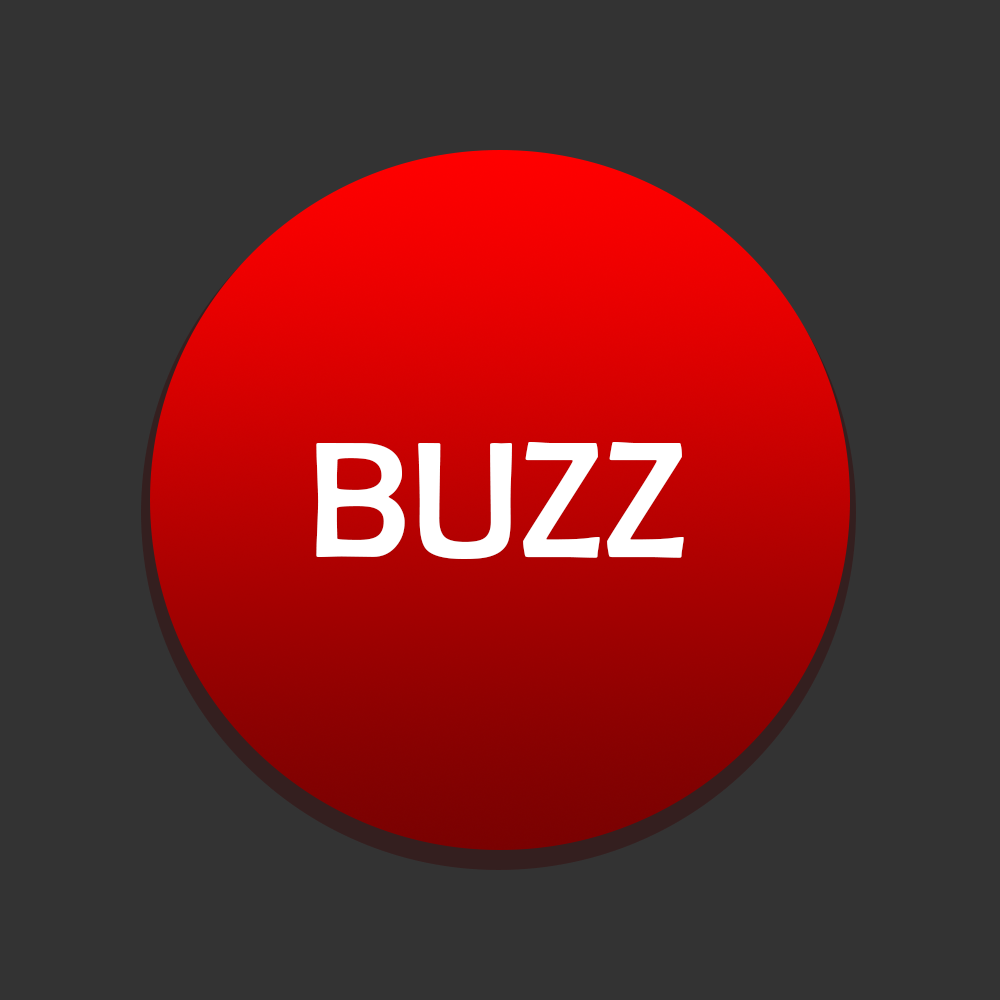
<style>
.page{position:relative;width:1000px;height:1000px;background:#333333}
.page>*{position:absolute;margin:0}
.t1{font:166.7px "BerlinSansFB-Reg";color:#ffffff}
</style>
<div class="page">
<p class="t1" style="left:316px;top:442px;width:368px;height:117px">BUZZ</p>
</div>
